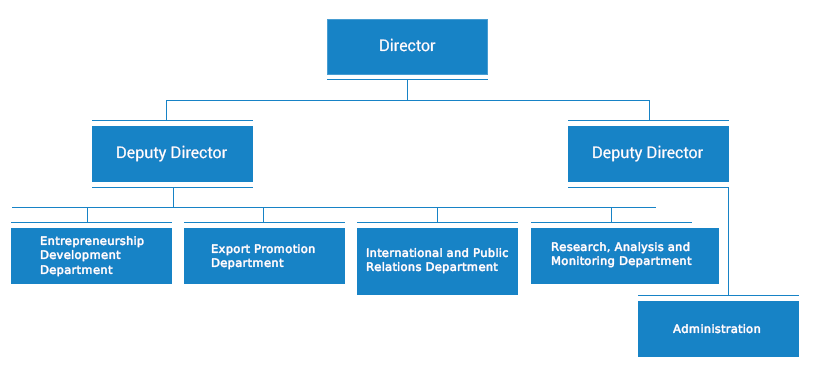
<style>
.page{position:relative;width:814px;height:367px;background:#ffffff}
.page>*{position:absolute;margin:0}
.t1{font:16px "Roboto-Regular";color:#ffffff}
.t2{font:12px "BPGWeb002";color:#ffffff}
</style>
<div class="page">
<p class="t1" style="left:380px;top:38px;width:56px;height:14px">Director</p>
<p class="t1" style="left:117px;top:145px;width:110px;height:17px">Deputy Director</p>
<p class="t1" style="left:593px;top:145px;width:110px;height:17px">Deputy Director</p>
<p class="t2" style="left:40px;top:235px;width:104px;height:42px">Entrepreneurship<br>Development<br>Department</p>
<p class="t2" style="left:211px;top:244px;width:104px;height:26px">Export Promotion<br>Department</p>
<p class="t2" style="left:551px;top:241px;width:141px;height:27px">Research, Analysis and<br>Monitoring Department</p>
<p class="t2" style="left:366px;top:247px;width:143px;height:27px">International and Public<br>Relations Department</p>
<p class="t2" style="left:673px;top:323px;width:88px;height:11px">Administration</p>
</div>
